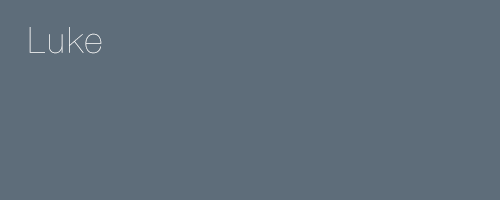
<style>
.page{position:relative;width:500px;height:200px;background:#5e6d7a}
.page>*{position:absolute;margin:0}
.t1{font:36px "HelveticaNeue-UltraLight";letter-spacing:0.05em;color:#fbfcfc}
</style>
<div class="page">
<p class="t1" style="left:29px;top:27px;width:73px;height:27px">Luke</p>
</div>
